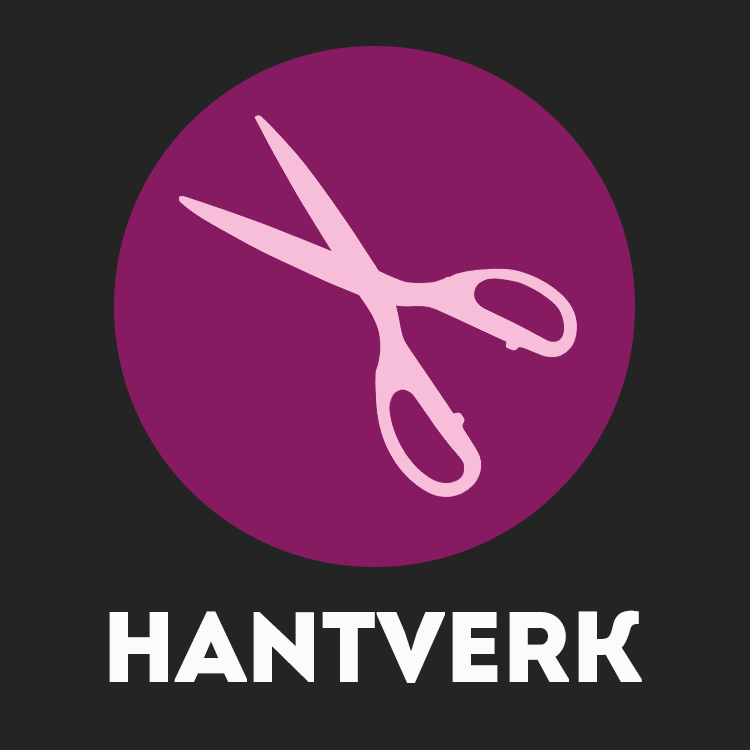
<style>
.page{position:relative;width:750px;height:750px;background:#242424}
.page>*{position:absolute;margin:0}
.t1{font:100px "Intro-Black";color:#fbfbfb}
</style>
<div class="page">
<p class="t1" style="left:109px;top:610px;width:533px;height:73px">HANTVERK</p>
</div>
